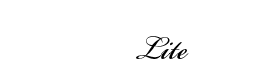
<style>
.page{position:relative;width:256px;height:64px;background:#ffffff}
.page>*{position:absolute;margin:0}
.t1{font:48px "BickhamScriptPro-Regular";color:#000000}
</style>
<div class="page">
<p class="t1" style="left:136px;top:36px;width:53px;height:23px">Lite</p>
</div>
